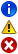
<style>
.page{position:relative;width:18px;height:54px;background:#ffffff}
.page>*{position:absolute;margin:0}
.t1{font:13px "LithosPro-Black";color:#fefefe}
</style>
<div class="page">
<p class="t1" style="left:4px;top:40px;width:10px;height:11px">X</p>
</div>
